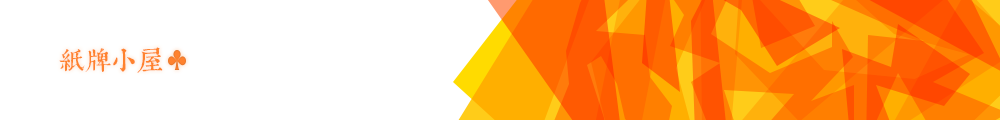
<style>
.page{position:relative;width:1000px;height:120px;background:#ffffff}
.page>*{position:absolute;margin:0}
.t1{font:26px "TpldKhangXiDictTrial";color:#ff822e}
</style>
<div class="page">
<p class="t1" style="left:59px;top:47px;width:104px;height:26px">紙牌小屋</p>
</div>
